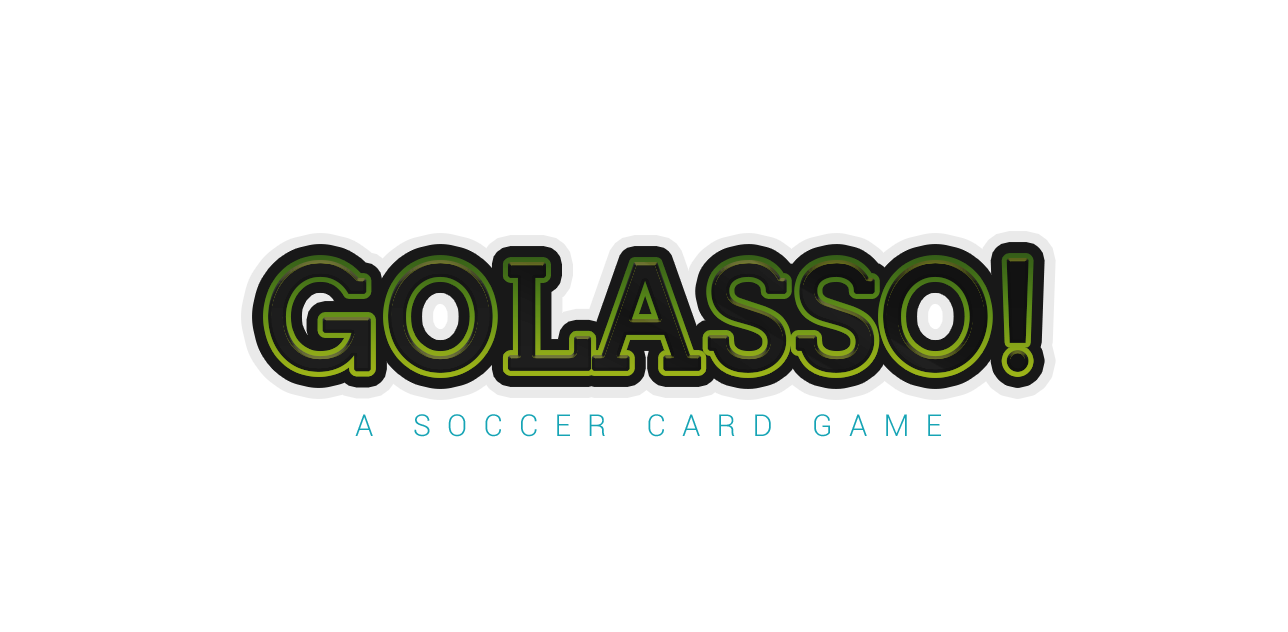
<style>
.page{position:relative;width:1288px;height:632px;background:#ffffff}
.page>*{position:absolute;margin:0}
.t1{font:142px "Arvo";color:#1a1a18;text-transform:uppercase;font-weight:bold}
.t2{font:30px "Roboto-Light";letter-spacing:0.54em;color:#0c99b7;text-transform:uppercase}
</style>
<div class="page">
<p class="t1" style="left:268px;top:258px;width:761px;height:115px">GOLASSO!</p>
<p class="t2" style="left:355px;top:414px;width:586px;height:23px">A soccer card game</p>
</div>
